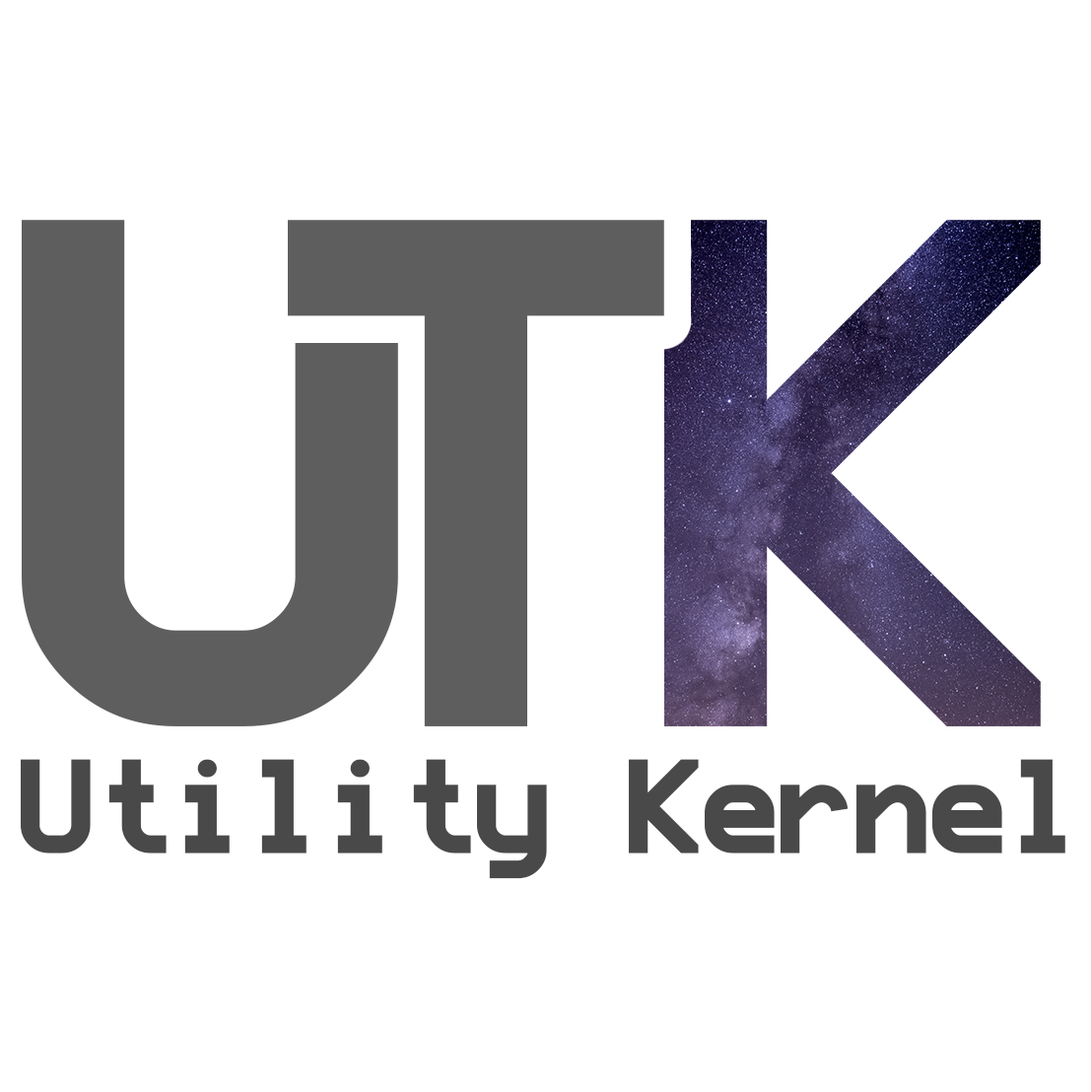
<style>
.page{position:relative;width:1091px;height:1092px;background:#ffffff}
.page>*{position:absolute;margin:0}
.t1{font:821.7px "ProFontForPowerline-Bold";color:#5e5e5e}
.t2{font:152px "ProFontForPowerline-Bold";color:#4a4949}
</style>
<div class="page">
<p class="t1" style="left:288px;top:220px;width:377px;height:507px">T</p>
<p class="t2" style="left:21px;top:759px;width:1045px;height:121px">Utility Kernel</p>
</div>
